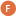
<style>
.page{position:relative;width:16px;height:16px;background:#df6e41}
.page>*{position:absolute;margin:0}
.t1{font:10px "MyriadPro-Regular";color:#ffffff}
</style>
<div class="page">
<p class="t1" style="left:6px;top:5px;width:4px;height:7px">F</p>
</div>
